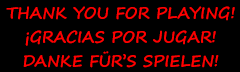
<style>
.page{position:relative;width:240px;height:72px;background:#000000}
.page>*{position:absolute;margin:0}
.t1{font:16px "SegoePrint-Bold";color:#ff0000}
</style>
<div class="page">
<p class="t1" style="left:6px;top:6px;width:229px;height:15px">THANK YOU FOR PLAYING!</p>
<p class="t1" style="left:25px;top:30px;width:191px;height:16px">¡GRACIAS POR JUGAR!</p>
<p class="t1" style="left:23px;top:51px;width:196px;height:17px">DANKE FÜR’S SPIELEN!</p>
</div>
